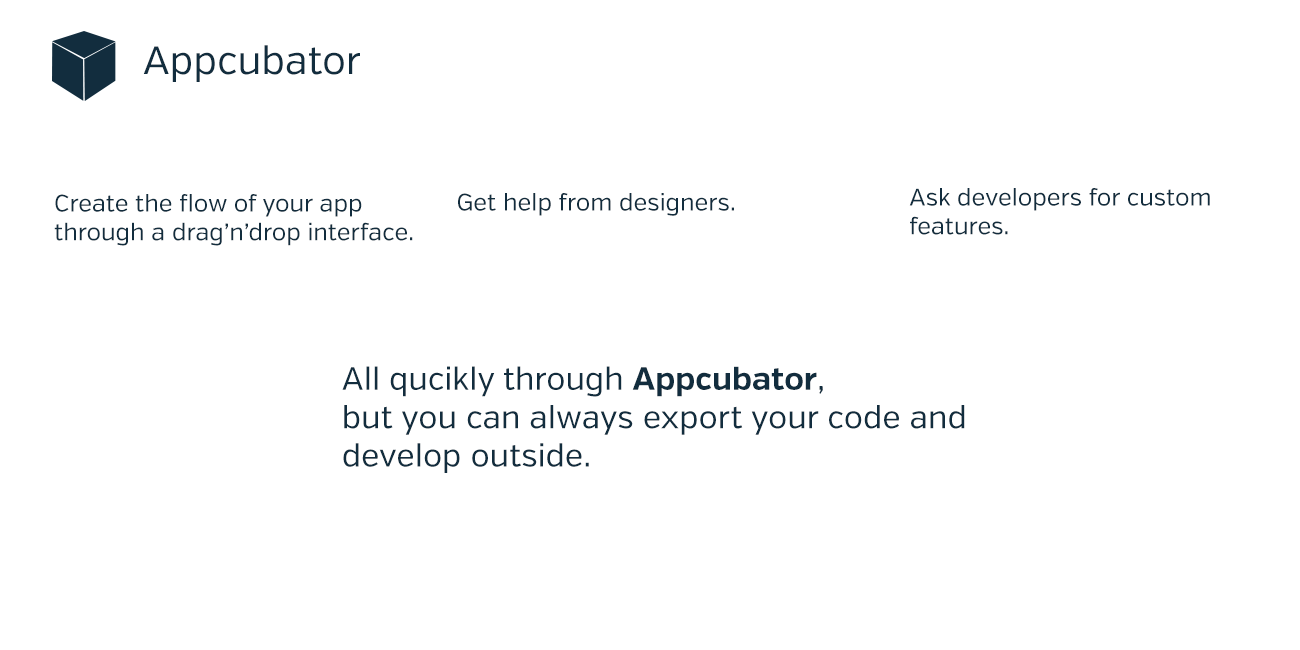
<style>
.page{position:relative;width:1300px;height:650px;background:#ffffff}
.page>*{position:absolute;margin:0}
.t1{font:39.4px "VerbRegular";color:#122d3e}
.t2{font:24px "VerbRegular";color:#122d3e}
.t3{font:32px "VerbRegular";color:#122d3e}
.t4{font:32px "VerbRegular-Bold";color:#122d3e}
</style>
<div class="page">
<p class="t1" style="left:143px;top:45px;width:217px;height:37px">Appcubator</p>
<p class="t2" style="left:54px;top:194px;width:359px;height:52px">Create the flow of your app through a drag’n’drop interface.</p>
<p class="t2" style="left:458px;top:193px;width:276px;height:23px">Get help from designers.</p>
<p class="t2" style="left:909px;top:188px;width:301px;height:47px">Ask developers for custom features.</p>
<p class="t3" style="left:342px;top:366px;width:623px;height:107px">All qucikly through <span class="t4">Appcubator</span>,<br>but you can always export your code and develop outside.</p>
</div>
